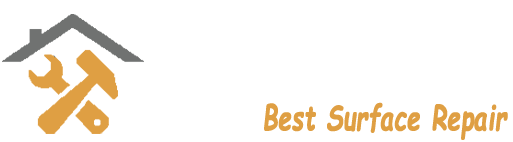
<style>
.page{position:relative;width:513px;height:142px;background:#ffffff}
.page>*{position:absolute;margin:0}
.t1{font:34.4px "ComicSansMS-BoldItalic";color:#df9f43;font-weight:bold;scale:0.68 1}
</style>
<div class="page">
<p class="t1" style="left:264px;top:102px;width:244px;height:38px">Best Surface Repair</p>
</div>
